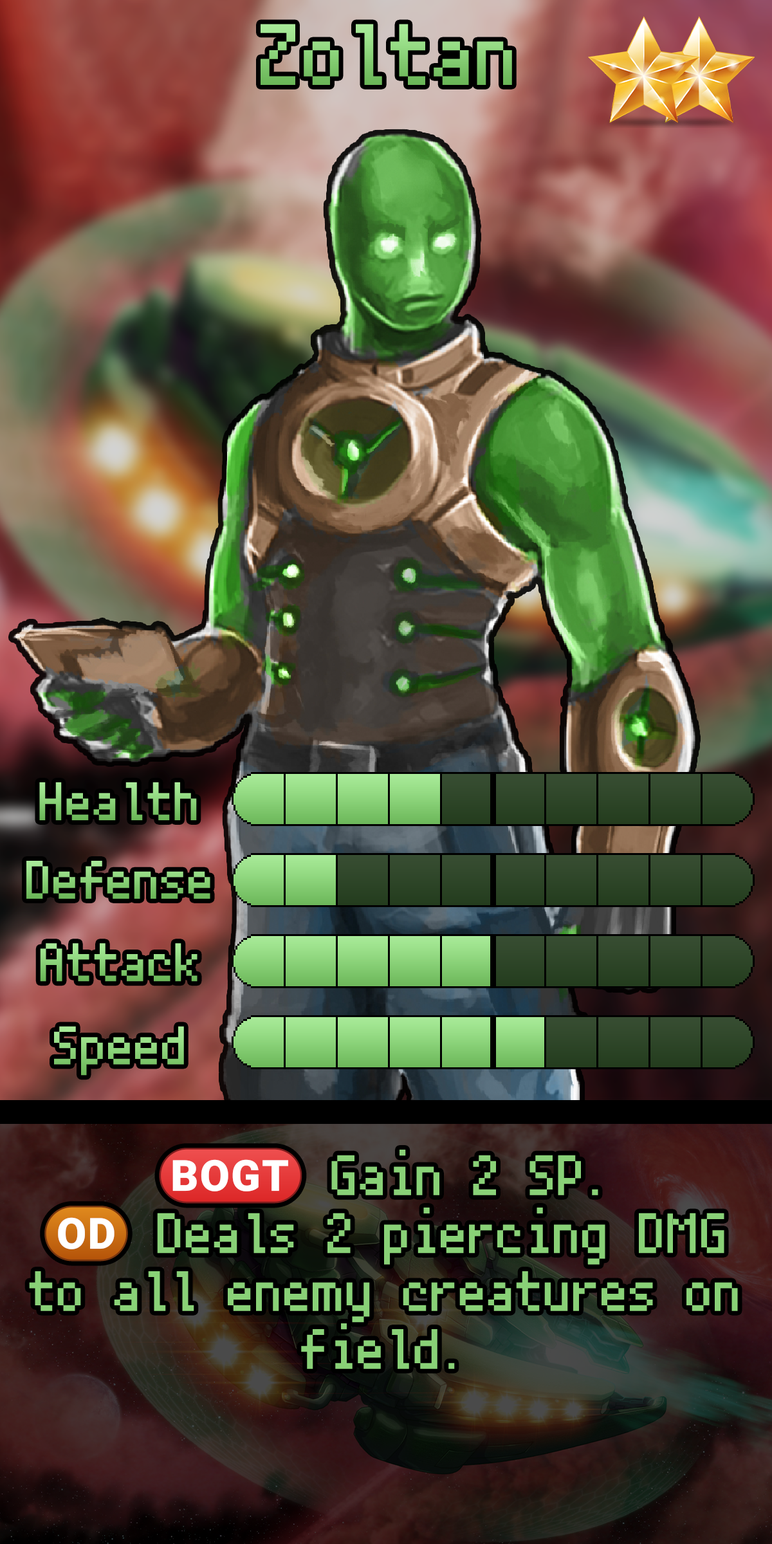
<style>
.page{position:relative;width:772px;height:1544px}
.page>*{position:absolute;margin:0}
.t1{font:148.6px "PixelMplus10-Regular"}
.t2{font:92.7px "PixelMplus10-Regular"}
.t3{font:92.7px "PixelMplus10-Regular";color:#8cd47b}
.t4{font:97.2px/57.9px "PixelMplus10-Regular";color:#89d177}
.t5{font:97.2px/57.9px "stoogedings-Regular";color:#89d177}
</style>
<div class="page">
<p class="t1" style="left:261px;top:24px;width:251px;height:61px">Zoltan</p>
<p class="t2" style="left:39px;top:782px;width:158px;height:38px">Health</p>
<p class="t2" style="left:26px;top:861px;width:184px;height:38px">Defense</p>
<p class="t2" style="left:40px;top:943px;width:158px;height:39px">Attack</p>
<p class="t3" style="left:54px;top:1026px;width:130px;height:50px">Speed</p>
<p class="t4" style="left:29px;top:1148px;width:709px;height:221px;text-align:center"><span class="t5">(BOGT)</span> Gain 2 SP.<br><span class="t5">(OD)</span> Deals 2 piercing DMG to all enemy creatures on field.</p>
</div>
